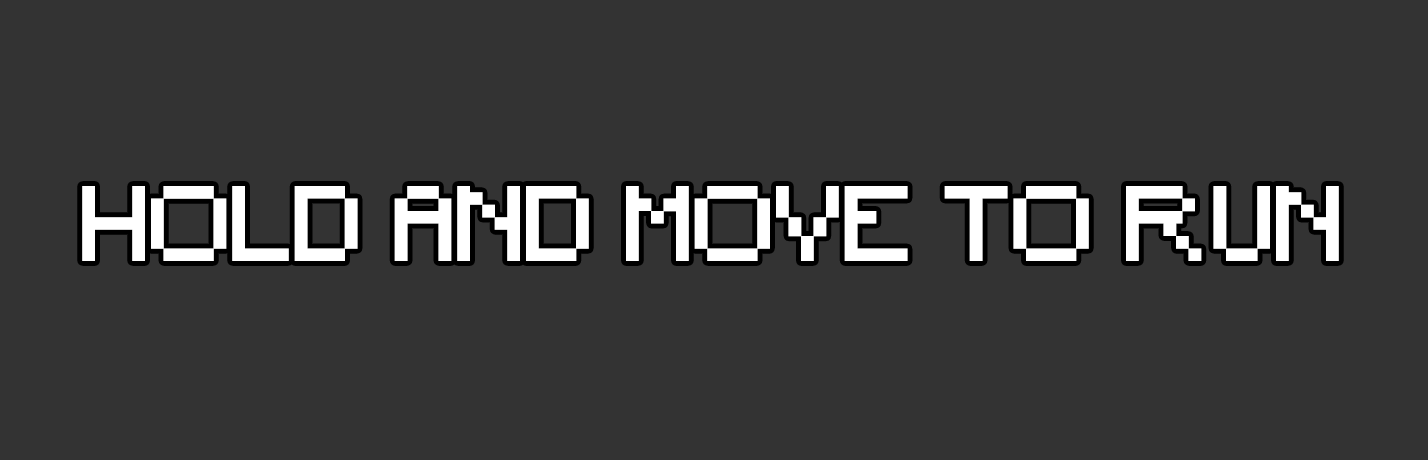
<style>
.page{position:relative;width:1428px;height:460px;background:#333333}
.page>*{position:absolute;margin:0}
.t1{font:100px "Minecraft";color:#ffffff}
</style>
<div class="page">
<p class="t1" style="left:82px;top:186px;width:1257px;height:75px">HOLD AND MOVE TO RUN</p>
</div>
